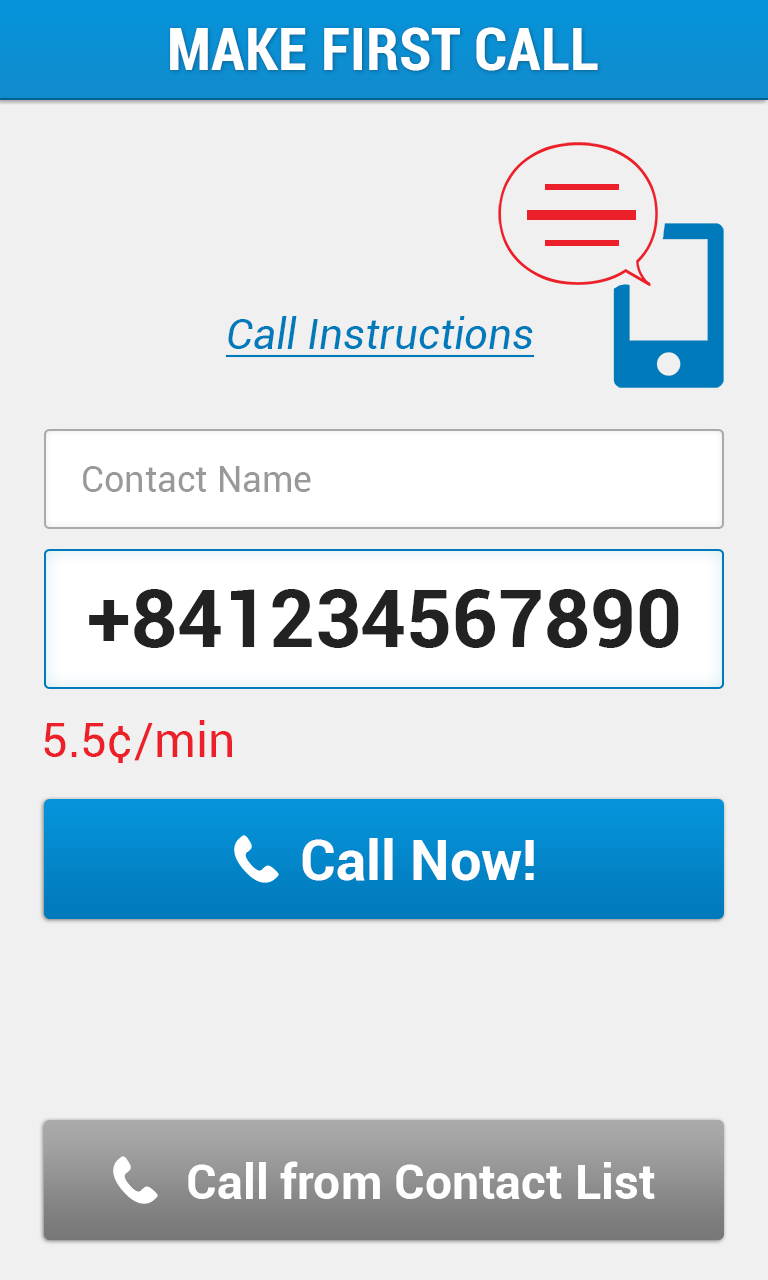
<style>
.page{position:relative;width:768px;height:1280px;background:#f0f0f0}
.page>*{position:absolute;margin:0}
.t1{font:60px "Roboto-BoldCondensed";color:#ffffff}
.t2{font:42px "Roboto-Italic";color:#007abb;text-decoration:underline}
.t3{font:36px "Roboto-Regular";color:#999999}
.t4{font:80px "Roboto-Bold";color:#222222}
.t5{font:48px "Roboto-Regular";color:#ec2028}
.t6{font:56px "Roboto-Bold";color:#ffffff}
.t7{font:48px "Roboto-Bold";color:#ffffff}
</style>
<div class="page">
<p class="t1" style="left:170px;top:27px;width:428px;height:44px">MAKE FIRST CALL</p>
<p class="t2" style="left:225px;top:316px;width:310px;height:42px">Call Instructions</p>
<p class="t3" style="left:83px;top:466px;width:228px;height:26px">Contact Name</p>
<p class="t4" style="left:89px;top:589px;width:590px;height:59px">+841234567890</p>
<p class="t5" style="left:44px;top:720px;width:188px;height:43px">5.5¢/min</p>
<p class="t6" style="left:302px;top:838px;width:232px;height:43px">Call Now!</p>
<p class="t7" style="left:188px;top:1161px;width:467px;height:38px">Call from Contact List</p>
</div>
